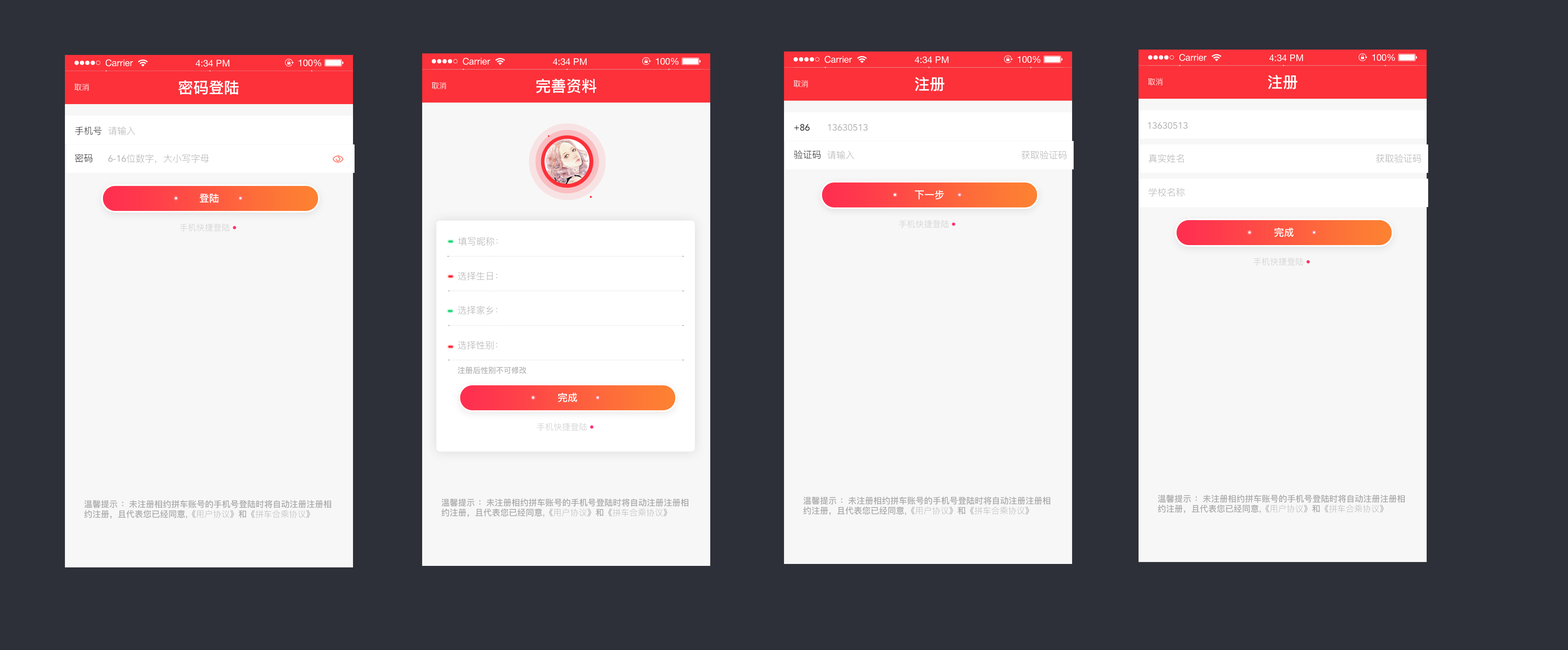
<style>
.page{position:relative;width:1568px;height:650px;background:#2d3038}
.page>*{position:absolute;margin:0}
.t1{font:15.4px "PingFang-SC-Bold";color:#ffffff}
.t2{font:7.7px "PingFang-SC-Regular";color:#ffffff}
.t3{font:9.2px "Avenir-Roman";color:#171717}
.t4{font:9.2px "Avenir-Roman";color:#b3b3b3}
.t5{font:9.2px "PingFang-SC-Regular";color:#171717}
.t6{font:9.2px "PingFang-SC-Regular";color:#b3b3b3}
.t7{font:10px "PingFang-SC-Bold";color:#ffffff}
.t8{font:8.5px "PingFang-SC-Medium";color:#d8d8d8}
.t9{font:7.7px "PingFang-SC-Bold";color:#b3b3b3}
.t10{font:8.5px/10px "PingFang-SC-Bold";color:#a9a9a9}
.t11{font:8.5px/10px "PingFang-SC-Medium";color:#a9a9a9}
.t12{font:8.5px/10px "PingFang-SC-Regular";color:#bdbdbd}
</style>
<div class="page">
<p class="t1" style="left:915px;top:77px;width:30px;height:14px">注册</p>
<p class="t2" style="left:1148px;top:78px;width:15px;height:7px">取消</p>
<p class="t1" style="left:1268px;top:75px;width:30px;height:15px">注册</p>
<p class="t2" style="left:75px;top:83px;width:14px;height:8px">取消</p>
<p class="t1" style="left:178px;top:80px;width:61px;height:15px">密码登陆</p>
<p class="t2" style="left:432px;top:82px;width:14px;height:7px">取消</p>
<p class="t1" style="left:536px;top:79px;width:61px;height:14px">完善资料</p>
<p class="t2" style="left:794px;top:80px;width:14px;height:7px">取消</p>
<p class="t3" style="left:794px;top:124px;width:16px;height:7px">+86</p>
<p class="t4" style="left:828px;top:124px;width:40px;height:7px">13630513</p>
<p class="t4" style="left:1148px;top:122px;width:40px;height:7px">13630513</p>
<p class="t5" style="left:75px;top:126px;width:27px;height:9px">手机号</p>
<p class="t6" style="left:108px;top:126px;width:27px;height:9px">请输入</p>
<p class="t5" style="left:75px;top:154px;width:18px;height:8px">密码</p>
<p class="t6" style="left:108px;top:154px;width:101px;height:9px"><span class="t4">6-16</span>位数字，大小写字母</p>
<p class="t5" style="left:794px;top:150px;width:27px;height:9px">验证码</p>
<p class="t6" style="left:827px;top:151px;width:27px;height:8px">请输入</p>
<p class="t6" style="left:1021px;top:151px;width:46px;height:8px">获取验证码</p>
<p class="t6" style="left:1149px;top:154px;width:35px;height:9px">真实姓名</p>
<p class="t6" style="left:1376px;top:154px;width:45px;height:9px">获取验证码</p>
<p class="t7" style="left:199px;top:193px;width:20px;height:10px">登陆</p>
<p class="t7" style="left:915px;top:190px;width:29px;height:9px">下一步</p>
<p class="t6" style="left:1149px;top:188px;width:36px;height:9px">学校名称</p>
<p class="t8" style="left:899px;top:220px;width:50px;height:8px">手机快捷登陆</p>
<p class="t8" style="left:180px;top:224px;width:50px;height:8px">手机快捷登陆</p>
<p class="t7" style="left:1274px;top:227px;width:20px;height:10px">完成</p>
<p class="t6" style="left:458px;top:237px;width:40px;height:9px">填写昵称：</p>
<p class="t8" style="left:1253px;top:258px;width:50px;height:8px">手机快捷登陆</p>
<p class="t6" style="left:458px;top:272px;width:39px;height:8px">选择生日：</p>
<p class="t6" style="left:458px;top:306px;width:39px;height:9px">选择家乡：</p>
<p class="t6" style="left:458px;top:341px;width:39px;height:9px">选择性别：</p>
<p class="t9" style="left:458px;top:366px;width:69px;height:8px">注册后性别不可修改</p>
<p class="t7" style="left:558px;top:393px;width:19px;height:9px">完成</p>
<p class="t8" style="left:537px;top:423px;width:50px;height:8px">手机快捷登陆</p>
<p class="t10" style="left:803px;top:496px;width:247px;height:19px">温馨提示 ：未注册相约拼车账号的手机号登陆时将自动注册注册相<br>约注册，且代表您已经同意<span class="t11">,《</span><span class="t12">用户协议</span><span class="t11">》</span>和<span class="t11">《</span><span class="t12">拼车合乘协议</span><span class="t11">》</span></p>
<p class="t10" style="left:1158px;top:494px;width:247px;height:20px">温馨提示 ：未注册相约拼车账号的手机号登陆时将自动注册注册相<br>约注册，且代表您已经同意<span class="t11">,《</span><span class="t12">用户协议</span><span class="t11">》</span>和<span class="t11">《</span><span class="t12">拼车合乘协议</span><span class="t11">》</span></p>
<p class="t10" style="left:84px;top:500px;width:247px;height:19px">温馨提示 ：未注册相约拼车账号的手机号登陆时将自动注册注册相<br>约注册，且代表您已经同意<span class="t11">,《</span><span class="t12">用户协议</span><span class="t11">》</span>和<span class="t11">《</span><span class="t12">拼车合乘协议</span><span class="t11">》</span></p>
<p class="t10" style="left:441px;top:498px;width:247px;height:19px">温馨提示 ：未注册相约拼车账号的手机号登陆时将自动注册注册相<br>约注册，且代表您已经同意<span class="t11">,《</span><span class="t12">用户协议</span><span class="t11">》</span>和<span class="t11">《</span><span class="t12">拼车合乘协议</span><span class="t11">》</span></p>
</div>
